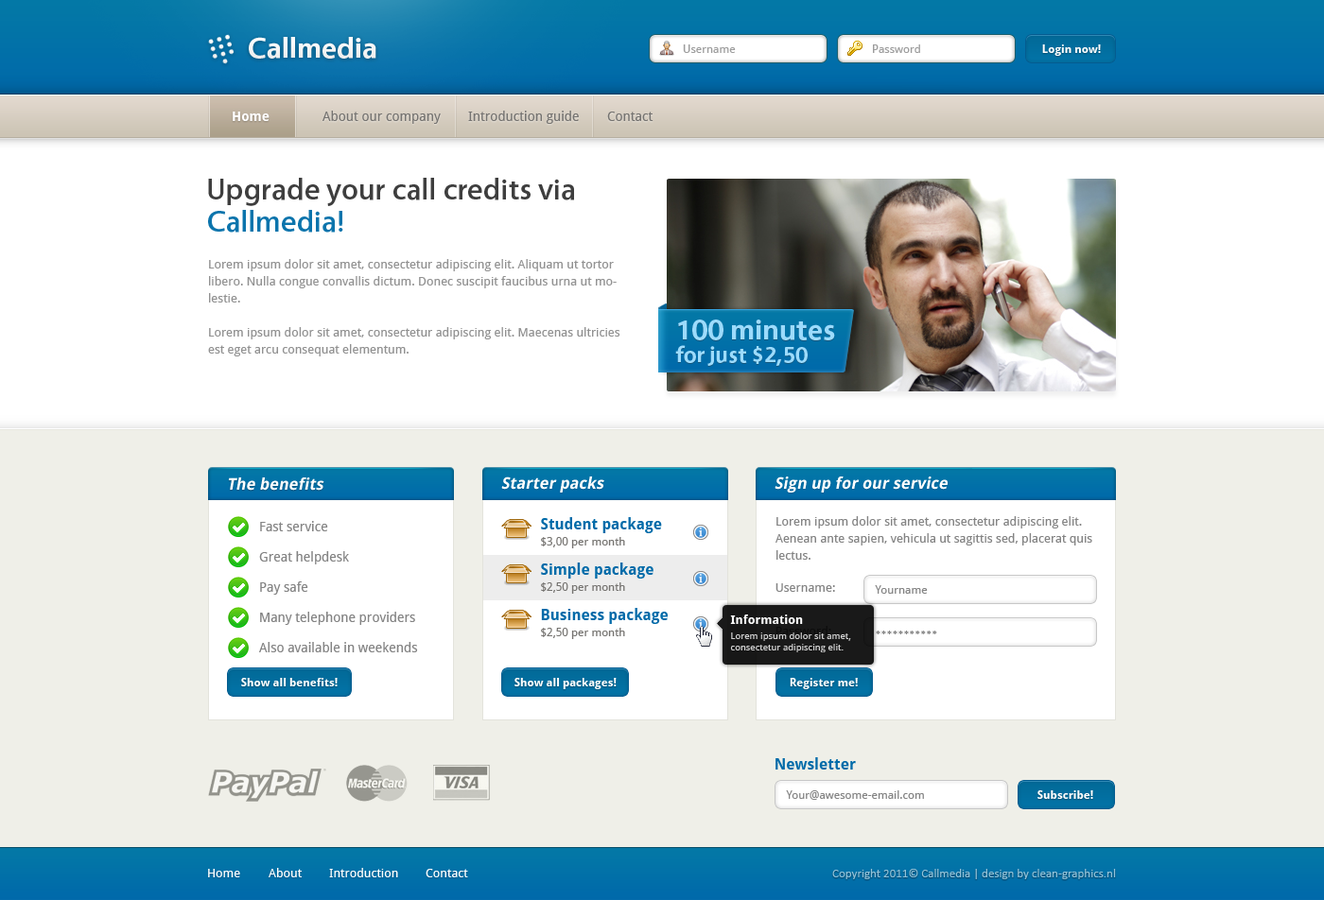
<style>
.page{position:relative;width:1324px;height:900px;background:#ffffff}
.page>*{position:absolute;margin:0}
.t1{font:29.3px "Vegur-Bold";color:#ffffff}
.t2{font:11.4px "DroidSans";color:#9d9d9d}
.t3{font:11.4px "DroidSans-Bold";color:#ffffff}
.t4{font:13.2px "DroidSans-Bold";color:#ffffff}
.t5{font:13.2px "DroidSans";color:#767471}
.t6{font:30.3px/32.2px "Vegur-Medium";color:#3e3e3e}
.t7{font:30.3px/32.2px "Vegur-Medium";color:#0b74ac}
.t8{font:12.3px/17px "DroidSans";color:#929292}
.t9{font:22.7px/22.7px "Vegur-Bold";color:#9cdbfc}
.t10{font:29.3px/17px "Vegur-Bold";color:#9cdbfc}
.t11{font:16.1px "DroidSans-Bold";color:#ffffff;font-style:italic}
.t12{font:13.2px/30.3px "DroidSans";color:#848484}
.t13{font:15.1px "DroidSans-Bold";color:#006ba9}
.t14{font:12.3px/17px "DroidSans";color:#848484}
.t15{font:11.4px "DroidSans";color:#767471}
.t16{font:12.3px "DroidSans";color:#848484}
.t17{font:11.4px "DroidSans";color:#848484}
.t18{font:12.3px "DroidSans-Bold";color:#ffffff}
.t19{font:9.5px "DroidSans";color:#d4d4d4}
.t20{font:11.4px "Calibri";color:#848484}
.t21{font:12.3px "DroidSans";color:#ffffff}
.t22{font:12.3px "Calibri";color:#92c2d9}
</style>
<div class="page">
<p class="t1" style="left:249px;top:37px;width:127px;height:22px">Callmedia</p>
<p class="t2" style="left:683px;top:44px;width:53px;height:9px">Username</p>
<p class="t2" style="left:873px;top:44px;width:47px;height:9px">Password</p>
<p class="t3" style="left:1042px;top:44px;width:59px;height:12px">Login now!</p>
<p class="t4" style="left:233px;top:112px;width:37px;height:9px">Home</p>
<p class="t5" style="left:323px;top:111px;width:118px;height:13px">About our company</p>
<p class="t5" style="left:468px;top:111px;width:111px;height:13px">Introduction guide</p>
<p class="t5" style="left:607px;top:112px;width:47px;height:9px">Contact</p>
<p class="t6" style="left:208px;top:178px;width:366px;height:55px">Upgrade your call credits via<span class="t7"> <br>Callmedia!</span></p>
<p class="t8" style="left:208px;top:259px;width:412px;height:98px">Lorem ipsum dolor sit amet, consectetur adipiscing elit. Aliquam ut tortor libero. Nulla congue convallis dictum. Donec suscipit faucibus urna ut molestie. <br><br>Lorem ipsum dolor sit amet, consectetur adipiscing elit. Maecenas ultricies est eget arcu consequat elementum.</p>
<p class="t9" style="left:675px;top:320px;width:160px;height:46px"><span class="t10">100 minutes<br></span>for just $2,50</p>
<p class="t11" style="left:228px;top:478px;width:96px;height:13px">The benefits</p>
<p class="t11" style="left:501px;top:477px;width:103px;height:16px">Starter packs</p>
<p class="t11" style="left:775px;top:477px;width:173px;height:16px">Sign up for our service</p>
<p class="t12" style="left:259px;top:521px;width:159px;height:132px">Fast service<br>Great helpdesk<br>Pay safe<br>Many telephone providers<br>Also available in weekends</p>
<p class="t13" style="left:541px;top:517px;width:121px;height:16px">Student package</p>
<p class="t14" style="left:776px;top:516px;width:316px;height:44px">Lorem ipsum dolor sit amet, consectetur adipiscing elit. Aenean ante sapien, vehicula ut sagittis sed, placerat quis lectus.</p>
<p class="t15" style="left:541px;top:537px;width:84px;height:12px">$3,00 per month</p>
<p class="t13" style="left:541px;top:563px;width:113px;height:16px">Simple package</p>
<p class="t15" style="left:541px;top:583px;width:84px;height:11px">$2,50 per month</p>
<p class="t16" style="left:776px;top:584px;width:59px;height:8px">Username:</p>
<p class="t17" style="left:875px;top:585px;width:53px;height:9px">Yourname</p>
<p class="t13" style="left:541px;top:608px;width:127px;height:16px">Business package</p>
<p class="t18" style="left:730px;top:615px;width:73px;height:9px">Information</p>
<p class="t15" style="left:541px;top:628px;width:84px;height:11px">$2,50 per month</p>
<p class="t19" style="left:730px;top:633px;width:121px;height:20px">Lorem ipsum dolor sit amet, consectetur adipiscing elit.</p>
<p class="t20" style="left:876px;top:631px;width:61px;height:4px">***********</p>
<p class="t3" style="left:241px;top:678px;width:97px;height:9px">Show all benefits!</p>
<p class="t3" style="left:515px;top:678px;width:102px;height:12px">Show all packages!</p>
<p class="t3" style="left:790px;top:678px;width:68px;height:12px">Register me!</p>
<p class="t13" style="left:776px;top:758px;width:80px;height:12px">Newsletter</p>
<p class="t17" style="left:786px;top:791px;width:138px;height:9px">Your@awesome-email.com</p>
<p class="t3" style="left:1038px;top:791px;width:55px;height:8px">Subscribe!</p>
<p class="t21" style="left:208px;top:869px;width:32px;height:9px">Home</p>
<p class="t21" style="left:269px;top:868px;width:33px;height:10px">About</p>
<p class="t21" style="left:329px;top:868px;width:69px;height:10px">Introduction</p>
<p class="t21" style="left:426px;top:869px;width:42px;height:9px">Contact</p>
<p class="t22" style="left:832px;top:869px;width:284px;height:11px">Copyright 2011© Callmedia | design by clean-graphics.nl</p>
</div>
